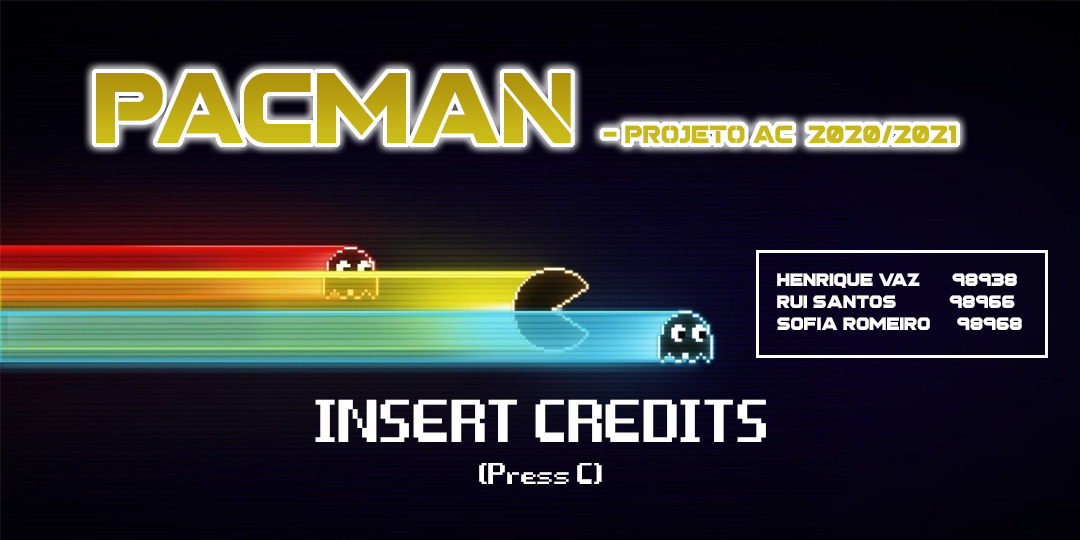
<style>
.page{position:relative;width:1080px;height:540px}
.page>*{position:absolute;margin:0}
.t1{font:25px "Stargaze-Stencil";color:#c0ab14}
.t2{font:100px "Stargaze-Stencil";color:#c0ab14}
.t3{font:18px "Stargaze-Regular";color:#fefefe}
.t4{font:150px "Game-Over";color:#fefefe}
.t5{font:75px "Game-Over";color:#fefefe}
</style>
<div class="page">
<p class="t1" style="left:96px;top:73px;width:860px;height:70px"><span class="t2">PACMAN </span>- Projeto ac  2020/2021</p>
<p class="t3" style="left:777px;top:273px;width:245px;height:57px">Henrique Vaz      98938<br>Rui Santos          98966<br>Sofia Romeiro     98968</p>
<p class="t4" style="left:315px;top:399px;width:451px;height:43px">INSERT CREDITS</p>
<p class="t5" style="left:479px;top:463px;width:123px;height:21px">(Press C)</p>
</div>
